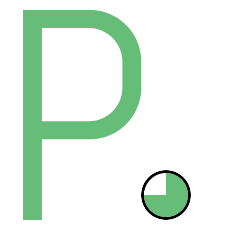
<style>
.page{position:relative;width:240px;height:240px;background:#ffffff}
.page>*{position:absolute;margin:0}
.t1{font:300px "Abel-Regular";color:#65bd77}
</style>
<div class="page">
<p class="t1" style="left:23px;top:9px;width:119px;height:211px">P</p>
</div>
